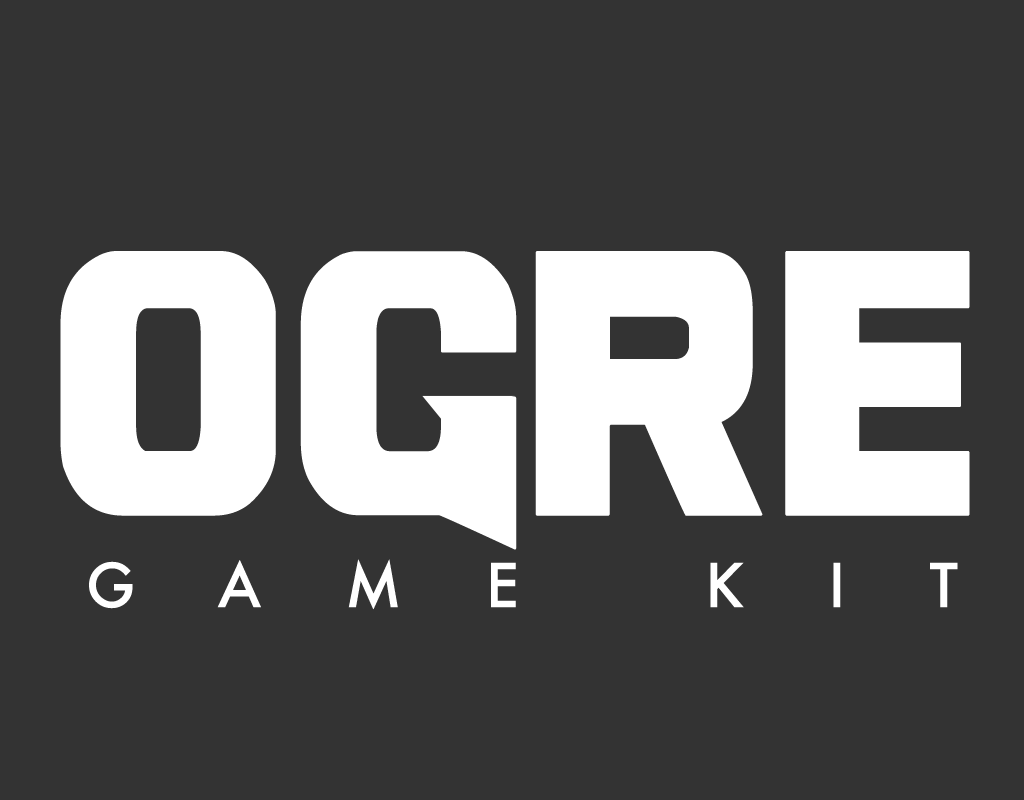
<style>
.page{position:relative;width:1024px;height:800px;background:#333333}
.page>*{position:absolute;margin:0}
.t1{font:294.3px "Ash";letter-spacing:0.009em;color:#ffffff;text-transform:uppercase;scale:0.73 1}
.t2{font:58.8px "Futura-Medium";letter-spacing:1.429em;color:#ffffff;text-transform:uppercase}
</style>
<div class="page">
<p class="t1" style="left:60px;top:251px;width:910px;height:299px">OGRE</p>
<p class="t2" style="left:89px;top:559px;width:869px;height:51px">GAME KIT</p>
</div>
